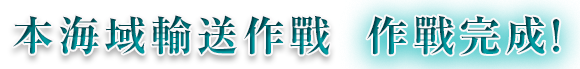
<style>
.page{position:relative;width:580px;height:69px;background:#ffffff}
.page>*{position:absolute;margin:0}
.t1{font:42px "RyuminPr6N-ExBold";letter-spacing:0.1em}
</style>
<div class="page">
<p class="t1" style="left:13px;top:15px;width:317px;height:40px">本海域輸送作戰</p>
<p class="t1" style="left:367px;top:15px;width:193px;height:40px">作戰完成!</p>
</div>
